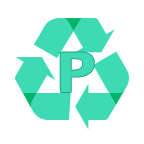
<style>
.page{position:relative;width:144px;height:144px;background:#ffffff}
.page>*{position:absolute;margin:0}
.t1{font:54.1px "LucidaSans-TypewriterBold";letter-spacing:0.01em;color:#3ddab4;font-weight:bold;scale:1.2 1}
</style>
<div class="page">
<p class="t1" style="left:60px;top:52px;width:34px;height:40px">P</p>
</div>
